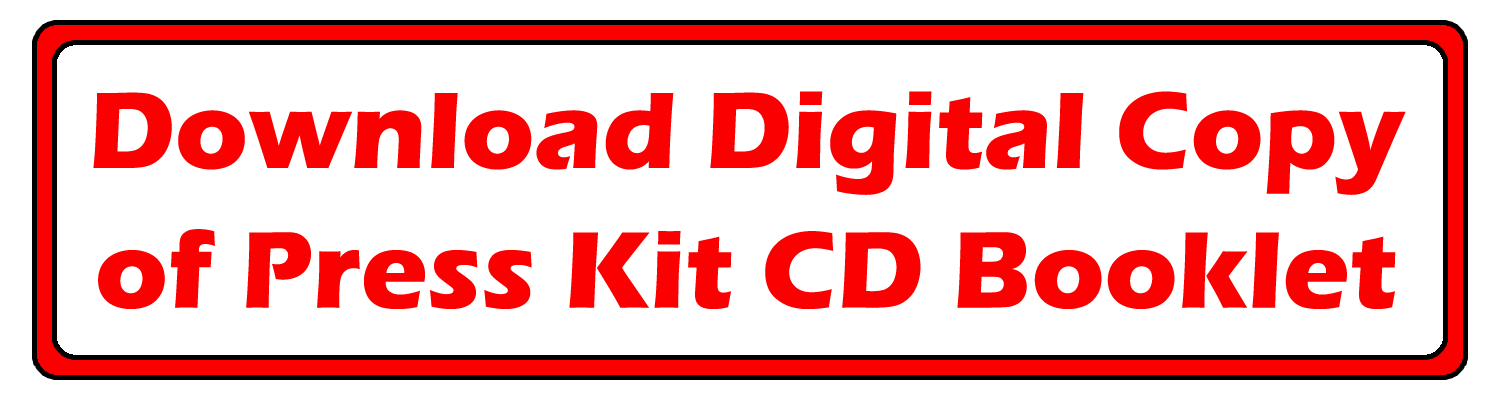
<style>
.page{position:relative;width:1500px;height:400px;background:#ffffff}
.page>*{position:absolute;margin:0}
.t1{font:112.5px "ErasITC-Bold";color:#fa0000}
</style>
<div class="page">
<p class="t1" style="left:93px;top:91px;width:1313px;height:218px;text-align:center">Download Digital Copy<br>of Press Kit CD Booklet</p>
</div>
